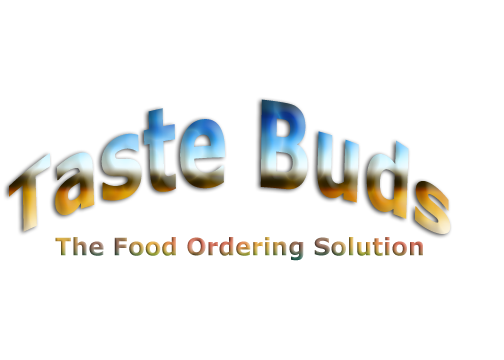
<style>
.page{position:relative;width:504px;height:360px;background:#ffffff}
.page>*{position:absolute;margin:0}
.t1{font:72px "Verdana-Bold"}
.t2{font:24px "Verdana-Bold"}
.t3{font:30px "Verdana-Bold"}
</style>
<div class="page">
<p class="t1" style="left:9px;top:99px;width:442px;height:135px;text-align:center">Taste Buds</p>
<p class="t2" style="left:55px;top:237px;width:368px;height:24px"><span class="t3"><br></span>The Food Ordering Solution</p>
</div>
